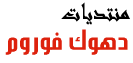
<style>
.page{position:relative;width:133px;height:63px;background:#ffffff}
.page>*{position:absolute;margin:0}
.t1{font:26px "Andalus";color:#000000}
.t2{font:30px "BoahmedAlHarf-Bold";color:#dd210d}
</style>
<div class="page">
<p class="t1" style="left:61px;top:2px;width:69px;height:23px">منتديات</p>
<p class="t2" style="left:5px;top:29px;width:123px;height:26px">دهوك فوروم</p>
</div>
